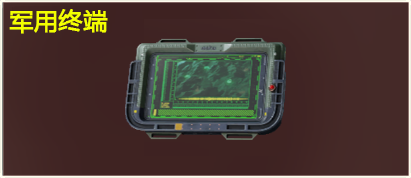
<style>
.page{position:relative;width:411px;height:178px}
.page>*{position:absolute;margin:0}
.t1{font:24px "MicrosoftYaHeiUI";color:#f4ff00;font-weight:bold}
</style>
<div class="page">
<p class="t1" style="left:9px;top:9px;width:99px;height:25px">军用终端</p>
</div>
